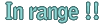
<style>
.page{position:relative;width:104px;height:24px;background:#ffffff}
.page>*{position:absolute;margin:0}
.t1{font:22px "BellGothicStd-Bold";letter-spacing:-0.025em;color:#8fd6d4}
</style>
<div class="page">
<p class="t1" style="left:6px;top:2px;width:92px;height:21px">In range !!</p>
</div>
